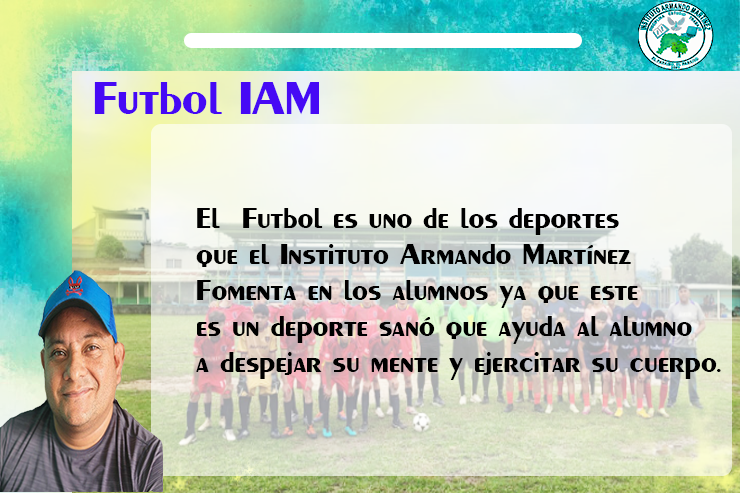
<style>
.page{position:relative;width:740px;height:493px}
.page>*{position:absolute;margin:0}
.t1{font:48px "Penultimate";color:#4609f5}
.t2{font:30px "Penultimate";color:#000000}
</style>
<div class="page">
<p class="t1" style="left:94px;top:82px;width:225px;height:33px">Futbol IAM</p>
<p class="t2" style="left:196px;top:208px;width:525px;height:172px">El  Futbol es uno de los deportes<br>que el Instituto Armando Martínez<br>Fomenta en los alumnos ya que este <br>es un deporte sanó que ayuda al alumno<br>a despejar su mente y ejercitar su cuerpo.</p>
</div>
